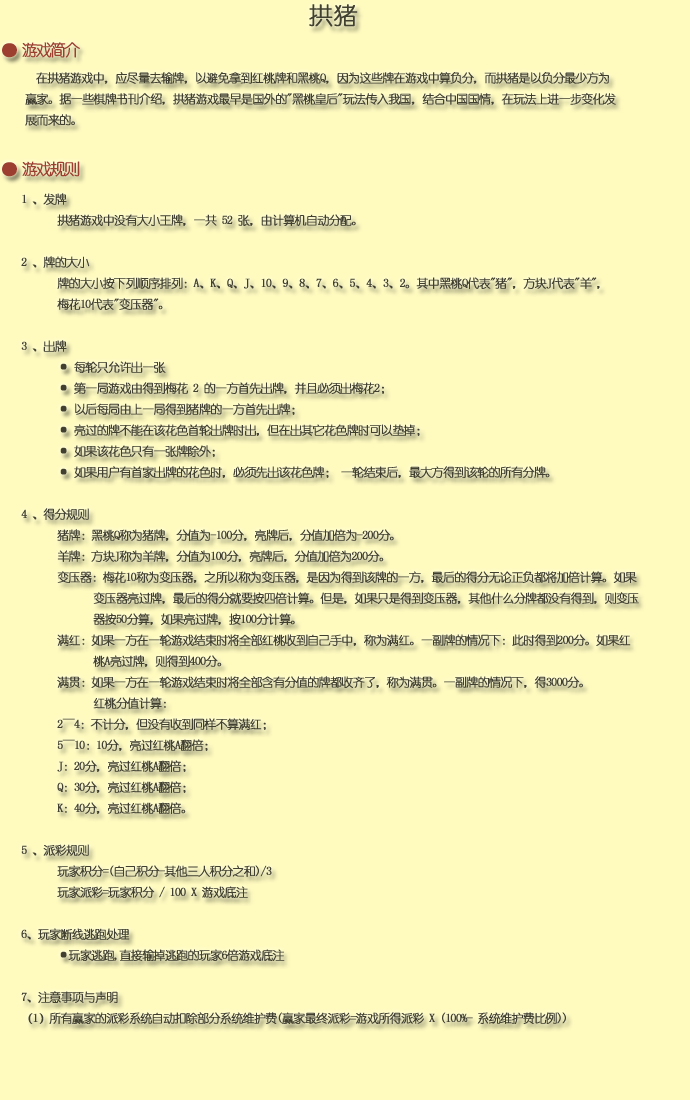
<style>
.page{position:relative;width:690px;height:1100px;background:#fffbbf}
.page>*{position:absolute;margin:0}
.t1{font:24px "YouYuan";color:#403f30;font-weight:bold}
.t2{font:16px "YouYuan";letter-spacing:-0.14em;color:#9c3f30;font-weight:bold}
.t3{font:12px "YouYuan";letter-spacing:-0.08em;color:#403f30;font-weight:bold}
</style>
<div class="page">
<p class="t1" style="left:309px;top:4px;width:49px;height:23px">拱猪</p>
<p class="t2" style="left:2px;top:42px;width:78px;height:16px">● 游戏简介</p>
<p class="t3" style="left:25px;top:72px;width:591px;height:54px">在拱猪游戏中，应尽量去输牌，以避免拿到红桃牌和黑桃Q，因为这些牌在游戏中算负分，而拱猪是以负分最少方为<br>赢家。据一些棋牌书刊介绍，拱猪游戏最早是国外的"黑桃皇后"玩法传入我国，结合中国国情，在玩法上进一步变化发<br>展而来的。</p>
<p class="t2" style="left:2px;top:161px;width:78px;height:16px">● 游戏规则</p>
<p class="t3" style="left:21px;top:193px;width:618px;height:831px">1 、发牌 <br> 拱猪游戏中没有大小王牌，一共 52 张，由计算机自动分配。 <br><br>2 、牌的大小 <br> 牌的大小按下列顺序排列：A、K、Q、J、10、9、8、7、6、5、4、3、2。其中黑桃Q代表"猪"，方块J代表"羊"，<br> 梅花10代表"变压器"。<br><br>3 、出牌 <br> · 每轮只允许出一张 <br> · 第一局游戏由得到梅花 2 的一方首先出牌，并且必须出梅花2； <br> · 以后每局由上一局得到猪牌的一方首先出牌； <br> · 亮过的牌不能在该花色首轮出牌时出，但在出其它花色牌时可以垫掉； <br> · 如果该花色只有一张牌除外； <br> · 如果用户有首家出牌的花色时，必须先出该花色牌； 一轮结束后，最大方得到该轮的所有分牌。 <br><br>4 、得分规则 <br> 猪牌：黑桃Q称为猪牌，分值为-100分，亮牌后，分值加倍为-200分。 <br> 羊牌：方块J称为羊牌，分值为100分，亮牌后，分值加倍为200分。 <br> 变压器：梅花10称为变压器，之所以称为变压器，是因为得到该牌的一方，最后的得分无论正负都将加倍计算。如果<br>  变压器亮过牌，最后的得分就要按四倍计算。但是，如果只是得到变压器，其他什么分牌都没有得到，则变压<br>  器按50分算，如果亮过牌，按100分计算。 <br> 满红：如果一方在一轮游戏结束时将全部红桃收到自己手中，称为满红。一副牌的情况下：此时得到200分。如果红<br>  桃A亮过牌，则得到400分。 <br> 满贯：如果一方在一轮游戏结束时将全部含有分值的牌都收齐了，称为满贯。一副牌的情况下，得3000分。 <br>  红桃分值计算： <br> 2～4：不计分，但没有收到同样不算满红； <br> 5～10：10分，亮过红桃A翻倍； <br> J：20分，亮过红桃A翻倍； <br> Q：30分，亮过红桃A翻倍； <br> K：40分，亮过红桃A翻倍。 <br><br>5 、派彩规则 <br> 玩家积分=(自己积分-其他三人积分之和)/3<br> 玩家派彩=玩家积分 / 100 X 游戏底注<br><br>6、玩家断线逃跑处理<br> ·玩家逃跑,直接输掉逃跑的玩家6倍游戏底注<br><br>7、注意事项与声明<br>（1）所有赢家的派彩系统自动扣除部分系统维护费(赢家最终派彩=游戏所得派彩 X (100%- 系统维护费比例))</p>
</div>
